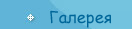
<style>
.page{position:relative;width:132px;height:29px;background:#60b4d8}
.page>*{position:absolute;margin:0}
.t1{font:16px "ComicSansMS";color:#006699}
</style>
<div class="page">
<p class="t1" style="left:50px;top:10px;width:61px;height:18px">Галерея</p>
</div>
